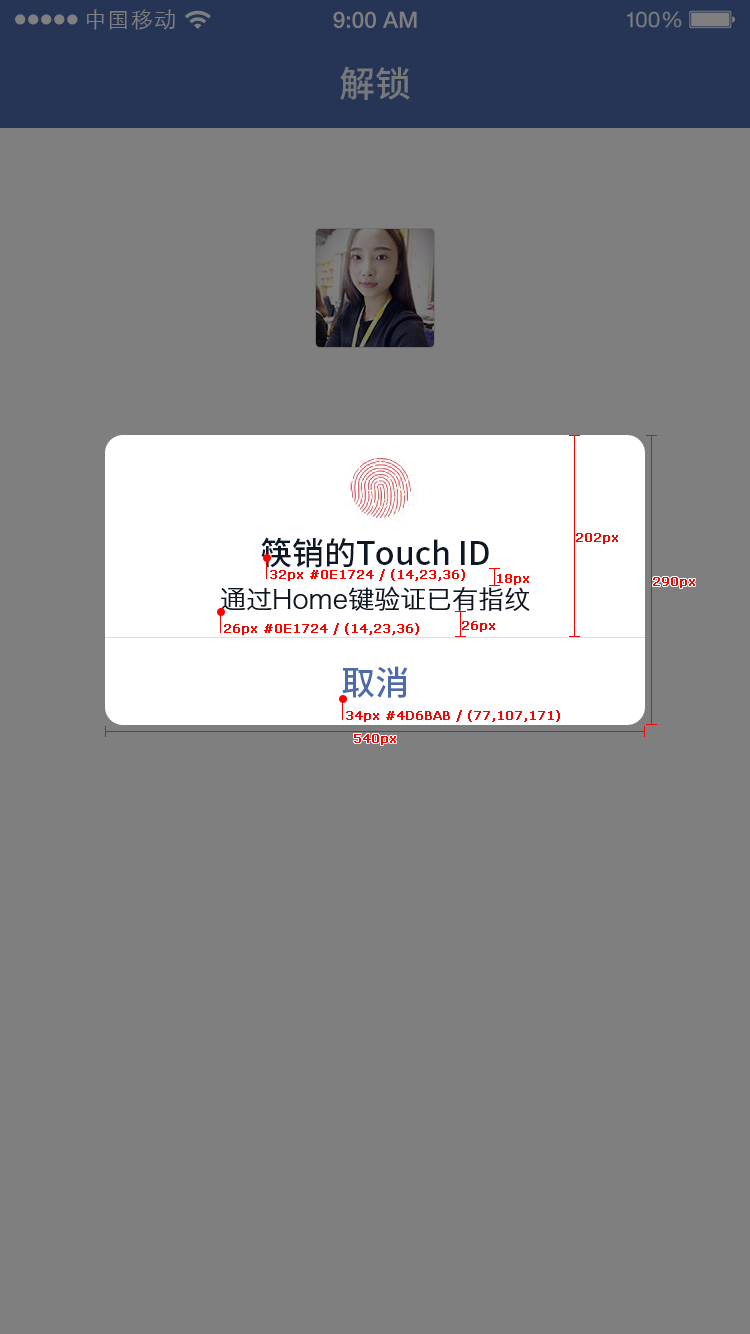
<style>
.page{position:relative;width:750px;height:1334px;background:#7f7f7f}
.page>*{position:absolute;margin:0}
.t1{font:21.9px "STXihei";letter-spacing:0.04em;color:#7f7f7f}
.t2{font:36px "NotoSansHans-Medium";color:#77787b}
.t3{font:12px "Verdana";color:#ff0000;font-weight:bold}
.t4{font:32px "NotoSansHans-Medium";color:#0e1724}
.t5{font:26px "HiraginoSansGB-W3";color:#0e1724}
.t6{font:34px "NotoSansHans-Medium";color:#4d6bab}
</style>
<div class="page">
<p class="t1" style="left:86px;top:9px;width:89px;height:21px">中国移动</p>
<p class="t2" style="left:340px;top:66px;width:70px;height:34px">解锁</p>
<p class="t3" style="left:576px;top:533px;width:42px;height:11px">202px</p>
<p class="t4" style="left:261px;top:537px;width:228px;height:31px">筷销的Touch ID</p>
<p class="t3" style="left:270px;top:569px;width:195px;height:12px">32px #0E1724 / (14,23,36)</p>
<p class="t3" style="left:497px;top:574px;width:32px;height:11px">18px</p>
<p class="t3" style="left:653px;top:577px;width:42px;height:11px">290px</p>
<p class="t5" style="left:220px;top:586px;width:310px;height:25px">通过Home键验证已有指纹</p>
<p class="t3" style="left:224px;top:623px;width:195px;height:12px">26px #0E1724 / (14,23,36)</p>
<p class="t3" style="left:462px;top:621px;width:33px;height:11px">26px</p>
<p class="t6" style="left:342px;top:666px;width:66px;height:32px">取消</p>
<p class="t3" style="left:346px;top:710px;width:214px;height:12px">34px #4D6BAB / (77,107,171)</p>
<p class="t3" style="left:354px;top:734px;width:42px;height:11px">540px</p>
</div>
